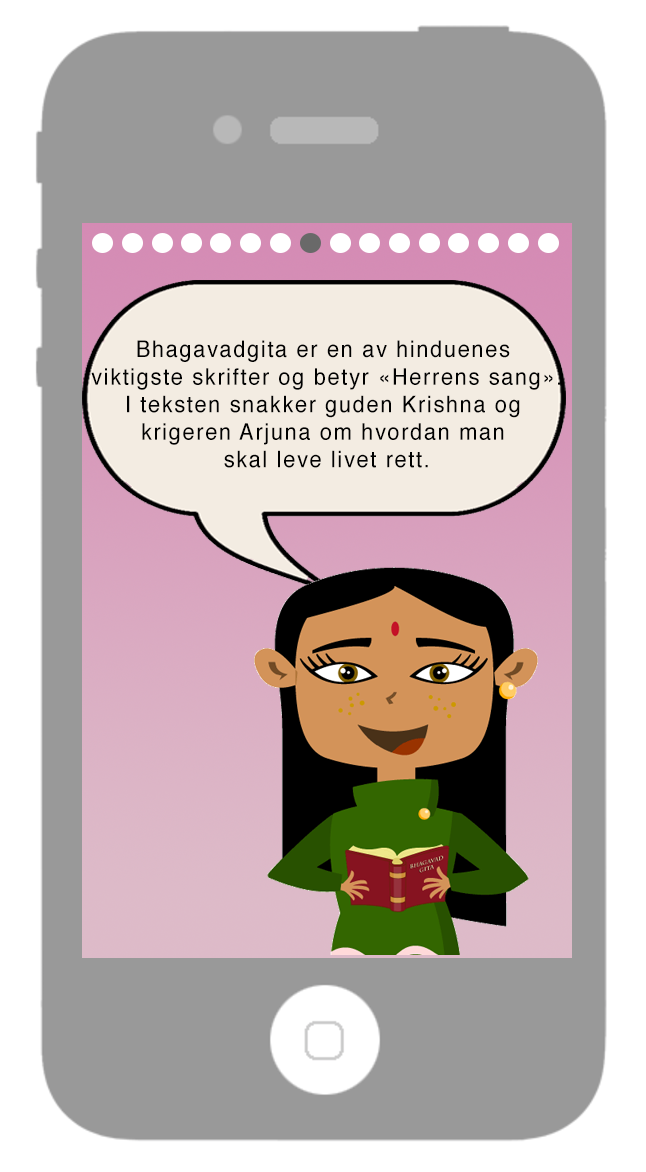
<style>
.page{position:relative;width:646px;height:1172px;background:#999999}
.page>*{position:absolute;margin:0}
.t1{font:11px "Helvetica";letter-spacing:0.075em;color:#010101;scale:0.95 1}
</style>
<div class="page">
<p class="t1" style="left:91px;top:340px;width:470px;height:128px;text-align:center">Bhagavadgita er en av hinduenes <br>viktigste skrifter og betyr «Herrens sang».<br>I teksten snakker guden Krishna og <br>krigeren Arjuna om hvordan man <br>skal leve livet rett.</p>
</div>
